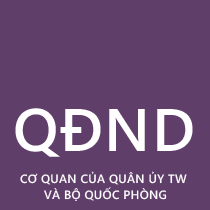
<style>
.page{position:relative;width:210px;height:210px;background:#603e6a}
.page>*{position:absolute;margin:0}
.t1{font:60px "SegoeWP-Semibold";letter-spacing:0.025em;color:#ffffff}
.t2{font:12px "SegoeWP-Semibold";letter-spacing:0.025em;color:#fefefe}
</style>
<div class="page">
<p class="t1" style="left:15px;top:108px;width:178px;height:49px">QĐND</p>
<p class="t2" style="left:20px;top:171px;width:167px;height:14px">CƠ QUAN CỦA QUÂN ỦY TW</p>
<p class="t2" style="left:44px;top:187px;width:123px;height:14px">VÀ BỘ QUỐC PHÒNG</p>
</div>
